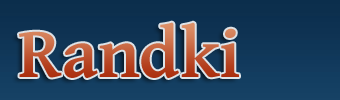
<style>
.page{position:relative;width:340px;height:100px}
.page>*{position:absolute;margin:0}
.t1{font:72px "GentiumBasic-Bold"}
</style>
<div class="page">
<p class="t1" style="left:19px;top:22px;width:220px;height:56px">Randki</p>
</div>
